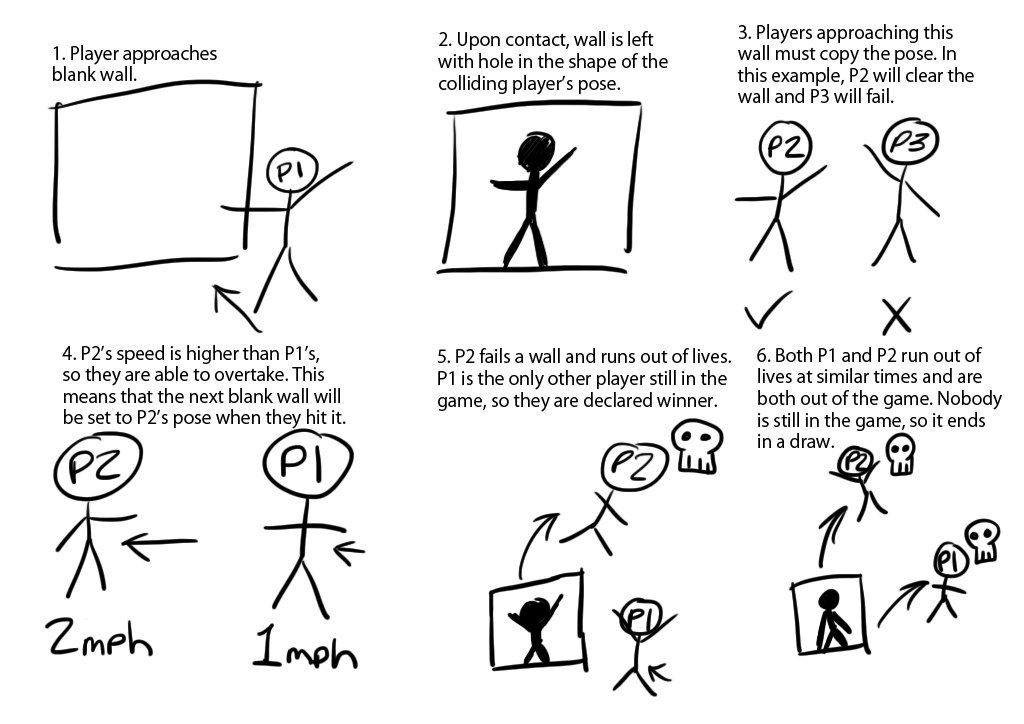
<style>
.page{position:relative;width:1024px;height:724px;background:#ffffff}
.page>*{position:absolute;margin:0}
.t1{font:18px "KozGoPr6N-Regular";color:#000000}
</style>
<div class="page">
<p class="t1" style="left:737px;top:24px;width:237px;height:79px">3. Players approaching this<br>wall must copy the pose. In<br>this example, P2 will clear the<br>wall and P3 will fail.</p>
<p class="t1" style="left:438px;top:31px;width:230px;height:64px">2. Upon contact, wall is left<br>with hole in the shape of the<br>colliding player’s pose.</p>
<p class="t1" style="left:53px;top:45px;width:164px;height:36px">1. Player approaches<br>blank wall.</p>
<p class="t1" style="left:62px;top:345px;width:284px;height:84px">4. P2’s speed is higher than P1’s,<br>so they are able to overtake. This<br>means that the next blank wall will<br>be set to P2’s pose when they hit it.</p>
<p class="t1" style="left:437px;top:348px;width:294px;height:64px">5. P2 fails a wall and runs out of lives.<br>P1 is the only other player still in the<br>game, so they are declared winner.</p>
<p class="t1" style="left:757px;top:347px;width:245px;height:101px">6. Both P1 and P2 run out of<br>lives at similar times and are<br>both out of the game. Nobody<br>is still in the game, so it ends<br>in a draw.</p>
</div>
